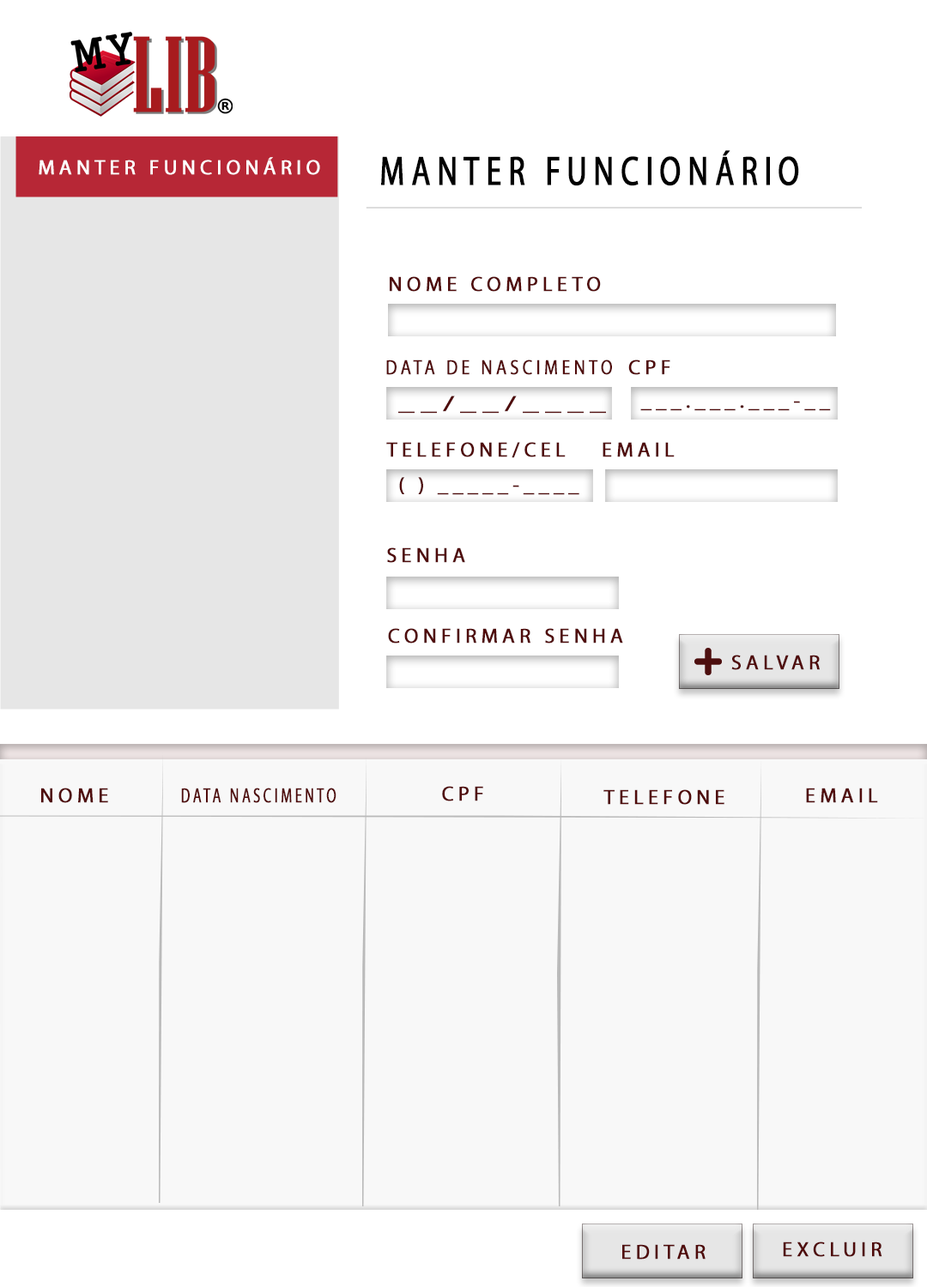
<style>
.page{position:relative;width:927px;height:1287px;background:#ffffff}
.page>*{position:absolute;margin:0}
.t1{font:20.6px "MyriadPro-Regular";letter-spacing:0.2em;color:#ffffff;font-weight:bold}
.t2{font:41.2px "MyriadPro-Regular";letter-spacing:0.2em;color:#000000;font-weight:bold;scale:0.74 1}
.t3{font:20.6px "MyriadPro-Regular";letter-spacing:0.2em;color:#500b0b;font-weight:bold}
.t4{font:20.5px "MyriadPro-Regular";letter-spacing:0.2em;color:#500b0b;font-weight:bold;scale:0.83 1}
.t5{font:20.5px "MyriadPro-Regular";letter-spacing:0.2em;color:#500b0b;font-weight:bold;scale:1.49 1}
.t6{font:20.6px "MyriadPro-Regular";letter-spacing:0.2em;color:#500b0b;font-weight:bold;scale:0.67 1}
</style>
<div class="page">
<p class="t1" style="left:39px;top:157px;width:281px;height:18px">MANTER FUNCIONÁRIO</p>
<p class="t2" style="left:381px;top:150px;width:418px;height:36px">MANTER FUNCIONÁRIO</p>
<p class="t3" style="left:390px;top:276px;width:211px;height:16px">NOME COMPLETO</p>
<p class="t4" style="left:386px;top:359px;width:226px;height:16px">DATA DE NASCIMENTO</p>
<p class="t3" style="left:628px;top:359px;width:42px;height:16px">CPF</p>
<p class="t5" style="left:398px;top:396px;width:208px;height:18px">__/__/____</p>
<p class="t3" style="left:640px;top:401px;width:190px;height:10px">___.___.___-__</p>
<p class="t3" style="left:386px;top:442px;width:179px;height:16px">TELEFONE/CEL</p>
<p class="t3" style="left:602px;top:442px;width:72px;height:15px">EMAIL</p>
<p class="t3" style="left:399px;top:477px;width:180px;height:18px">( ) _____-____</p>
<p class="t3" style="left:387px;top:547px;width:78px;height:16px">SENHA</p>
<p class="t3" style="left:388px;top:628px;width:235px;height:15px">CONFIRMAR SENHA</p>
<p class="t3" style="left:731px;top:655px;width:88px;height:15px">SALVAR</p>
<p class="t3" style="left:442px;top:786px;width:41px;height:15px">CPF</p>
<p class="t3" style="left:41px;top:788px;width:67px;height:15px">NOME</p>
<p class="t6" style="left:181px;top:788px;width:155px;height:15px">DATA NASCIMENTO</p>
<p class="t3" style="left:603px;top:789px;width:121px;height:16px">TELEFONE</p>
<p class="t3" style="left:806px;top:788px;width:72px;height:15px">EMAIL</p>
<p class="t3" style="left:782px;top:1241px;width:100px;height:16px">EXCLUIR</p>
<p class="t3" style="left:622px;top:1244px;width:83px;height:15px">EDITAR</p>
</div>
